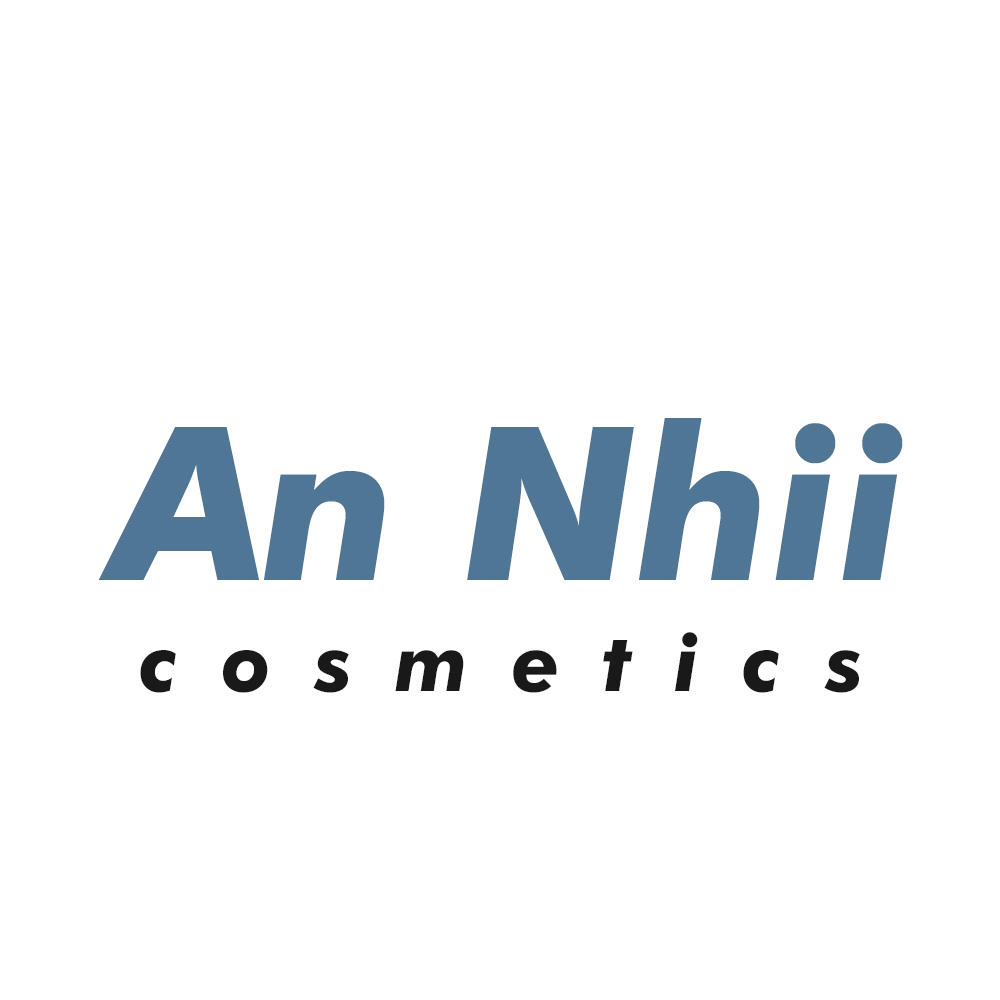
<style>
.page{position:relative;width:1000px;height:1000px;background:#ffffff}
.page>*{position:absolute;margin:0}
.t1{font:214px "FuturaBT-BoldItalic";color:#4f7795}
.t2{font:80.2px "FuturaBT-BoldItalic";letter-spacing:0.54em;color:#191919}
</style>
<div class="page">
<p class="t1" style="left:98px;top:418px;width:805px;height:162px">An Nhii</p>
<p class="t2" style="left:140px;top:632px;width:720px;height:61px">cosmetics</p>
</div>
